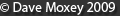
<style>
.page{position:relative;width:120px;height:16px;background:#333333}
.page>*{position:absolute;margin:0}
.t1{font:14px "MyriadPro-Regular";color:#ffffff}
</style>
<div class="page">
<p class="t1" style="left:0px;top:2px;width:115px;height:13px">© Dave Moxey 2009</p>
</div>
